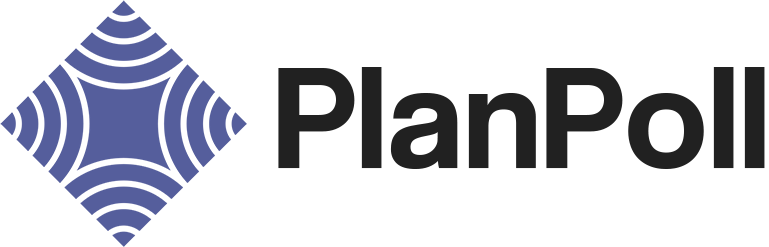
<style>
.page{position:relative;width:769px;height:247px;background:#ffffff}
.page>*{position:absolute;margin:0}
.t1{font:150px "CoolveticaRg-Regular";letter-spacing:0.02em;color:#212121}
</style>
<div class="page">
<p class="t1" style="left:278px;top:67px;width:487px;height:102px">PlanPoll</p>
</div>
